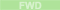
<style>
.page{position:relative;width:60px;height:10px;background:#afe39a}
.page>*{position:absolute;margin:0}
.t1{font:10px "Arial-BoldMT";color:#d7f1cd}
</style>
<div class="page">
<p class="t1" style="left:19px;top:1px;width:23px;height:8px">FWD</p>
</div>
